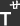
<style>
.page{position:relative;width:20px;height:26px;background:#333333}
.page>*{position:absolute;margin:0}
.t1{font:12px "DFKaiShu-SB-Estd-BF";color:#ffffff;font-weight:bold}
.t2{font:18px "ArialMT";color:#ffffff;font-weight:bold}
</style>
<div class="page">
<p class="t1" style="left:9px;top:0px;width:12px;height:9px">廿</p>
<p class="t2" style="left:0px;top:12px;width:11px;height:14px">T</p>
</div>
